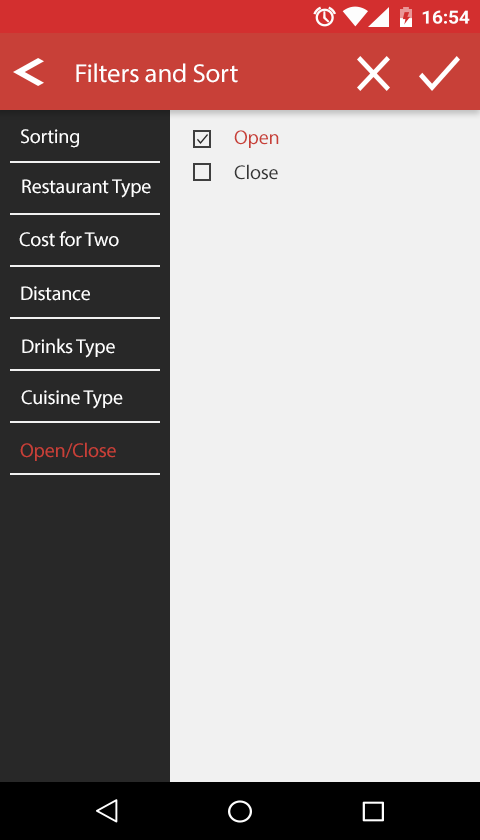
<style>
.page{position:relative;width:480px;height:840px;background:#f1f1f1}
.page>*{position:absolute;margin:0}
.t1{font:26.1px "MyriadPro-Regular";letter-spacing:-0.01em;color:#ffffff;scale:1.03 1}
.t2{font:20px "MyriadPro-Regular";letter-spacing:-0.01em;color:#fefefe}
.t3{font:20px "MyriadPro-Regular";letter-spacing:-0.01em;color:#c94038}
.t4{font:20px "MyriadPro-Regular";letter-spacing:-0.01em;color:#373737}
.t5{font:20px "MyriadPro-Regular";letter-spacing:-0.01em;color:#ffffff}
</style>
<div class="page">
<p class="t1" style="left:76px;top:63px;width:162px;height:20px">Filters and Sort</p>
<p class="t2" style="left:21px;top:129px;width:58px;height:19px">Sorting</p>
<p class="t3" style="left:234px;top:130px;width:45px;height:18px">Open</p>
<p class="t4" style="left:234px;top:164px;width:44px;height:16px">Close</p>
<p class="t5" style="left:22px;top:179px;width:129px;height:19px">Restaurant Type</p>
<p class="t5" style="left:19px;top:231px;width:100px;height:16px">Cost for Two</p>
<p class="t5" style="left:21px;top:286px;width:69px;height:15px">Distance</p>
<p class="t5" style="left:22px;top:338px;width:93px;height:20px">Drinks Type</p>
<p class="t5" style="left:21px;top:390px;width:102px;height:19px">Cuisine Type</p>
<p class="t3" style="left:20px;top:442px;width:96px;height:19px">Open/Close</p>
</div>
